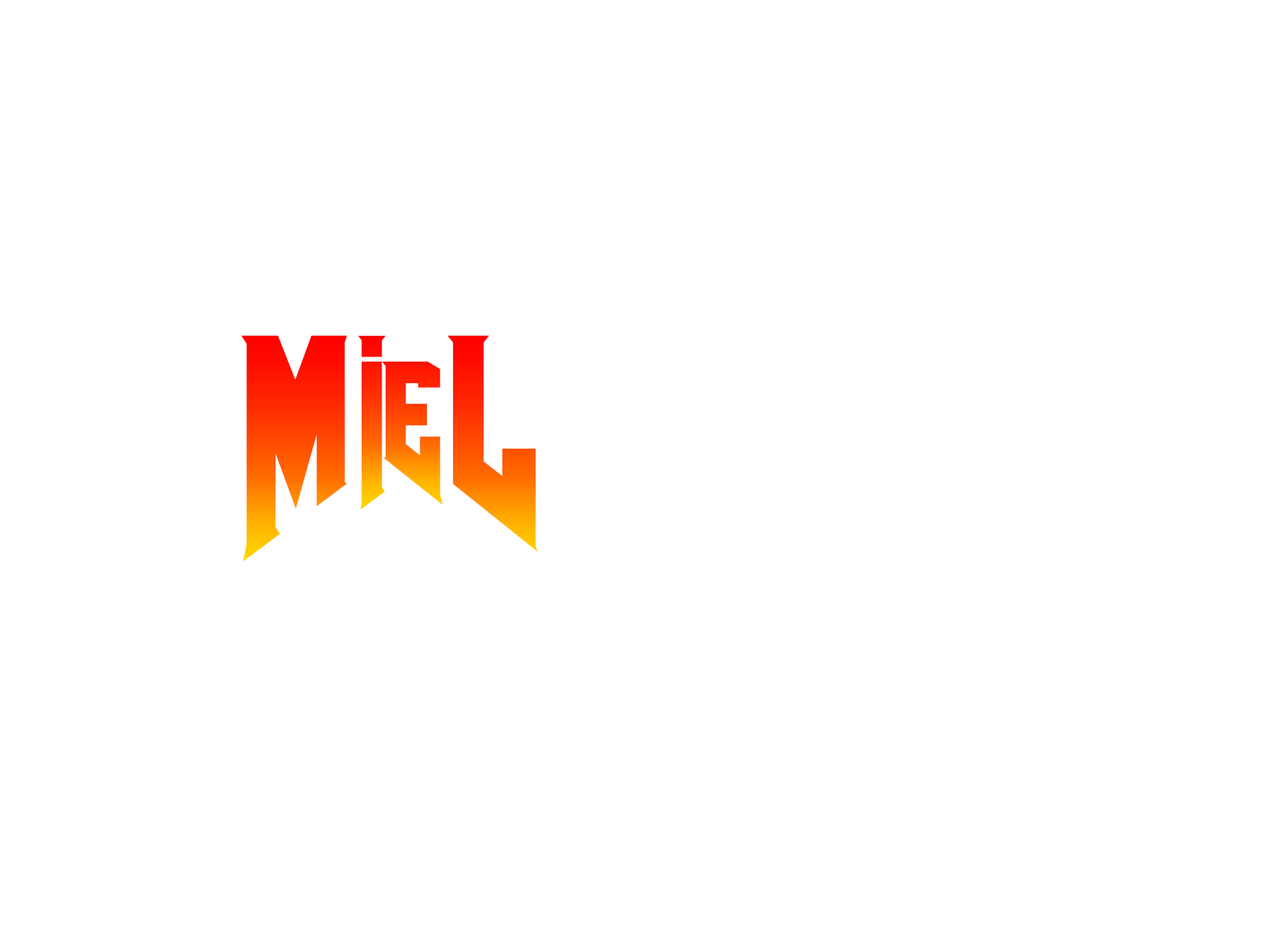
<style>
.page{position:relative;width:1261px;height:946px;background:#ffffff}
.page>*{position:absolute;margin:0}
.t1{font:278px "AmazDooMLeft"}
.t2{font:278px "AmazDooMRight"}
.t3{font:183.5px "AmazDooMLeft"}
.t4{font:183.5px "AmazDooMRight"}
</style>
<div class="page">
<p class="t1" style="left:241px;top:335px;width:297px;height:226px">M  <span class="t2">L</span></p>
<p class="t3" style="left:358px;top:336px;width:85px;height:174px">I<span class="t4">E</span></p>
</div>
